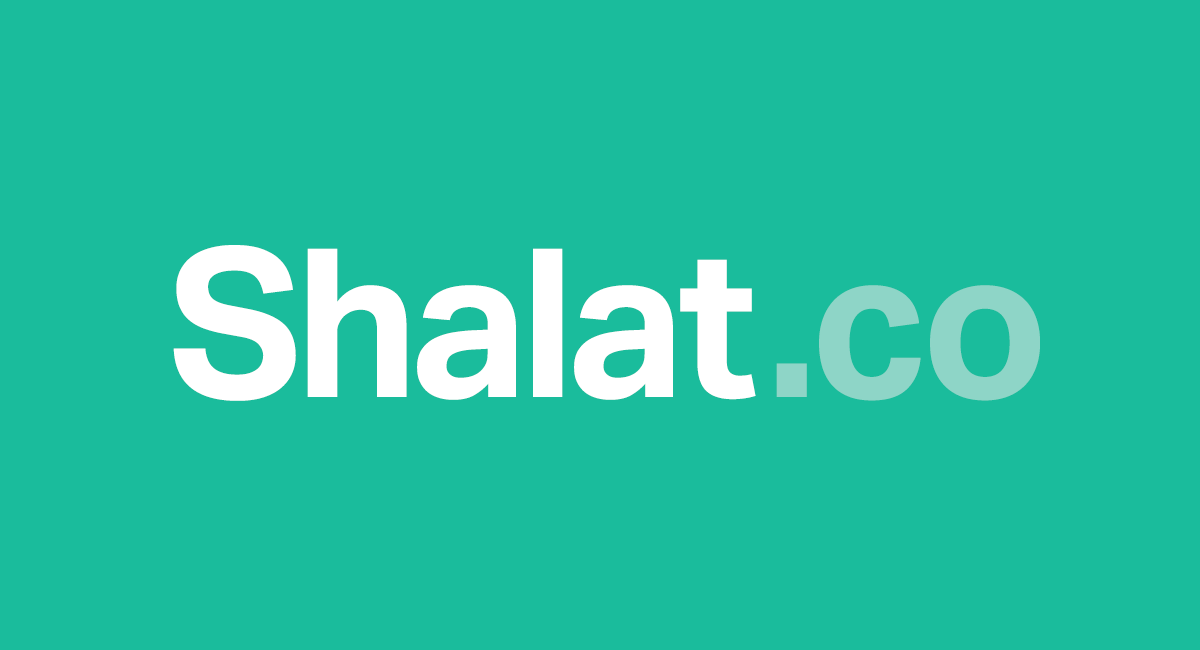
<style>
.page{position:relative;width:1200px;height:650px;background:#1abc9c}
.page>*{position:absolute;margin:0}
.t1{font:207.4px "AktivGrotesk-Bold";letter-spacing:-0.035em;color:#ffffff}
.t2{font:207.4px "AktivGrotesk-Bold";letter-spacing:0.045em;color:#ffffff}
.t3{font:207.4px "AktivGrotesk-Bold";letter-spacing:-0.035em;color:#8ed5c7}
</style>
<div class="page">
<p class="t1" style="left:173px;top:245px;width:867px;height:156px">Shala<span class="t2">t</span><span class="t3">.co</span></p>
</div>
